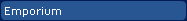
<style>
.page{position:relative;width:187px;height:21px;background:#285692}
.page>*{position:absolute;margin:0}
.t1{font:16px "Foxley816";color:#ffffff}
</style>
<div class="page">
<p class="t1" style="left:5px;top:7px;width:56px;height:10px">Emporium</p>
</div>
